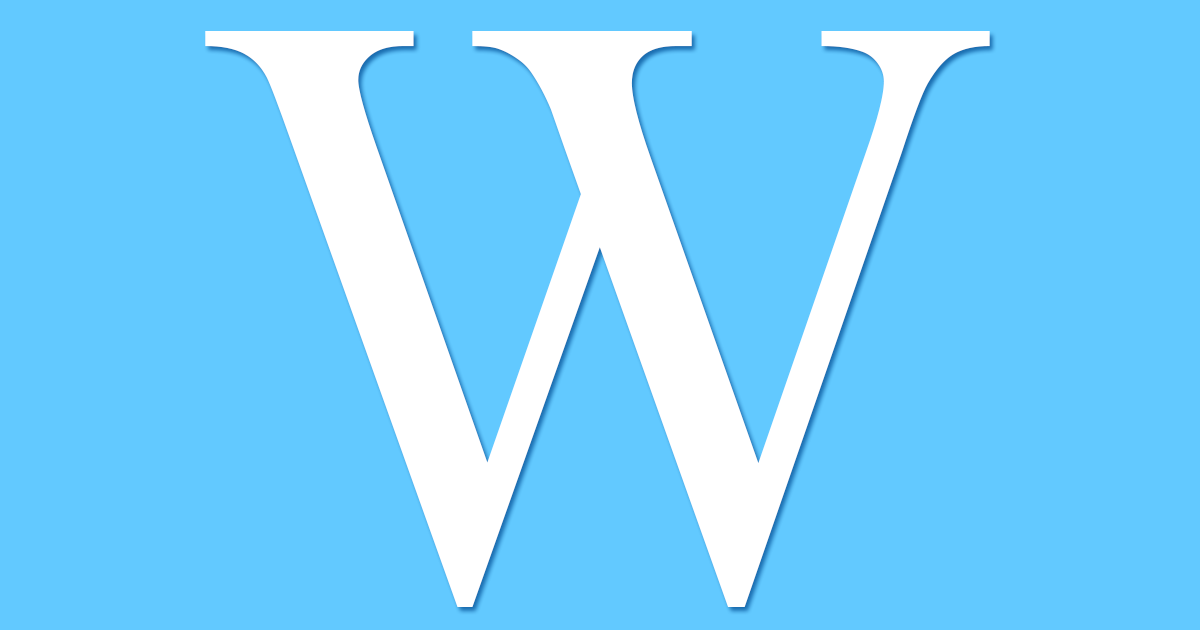
<style>
.page{position:relative;width:1200px;height:630px;background:#62c9ff}
.page>*{position:absolute;margin:0}
.t1{font:850px "TimesNewRomanPSMT";color:#ffffff}
</style>
<div class="page">
<p class="t1" style="left:205px;top:31px;width:785px;height:576px">W</p>
</div>
